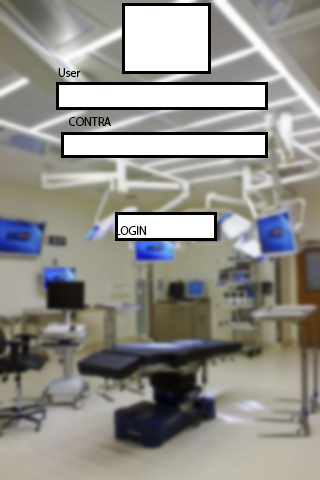
<style>
.page{position:relative;width:320px;height:480px}
.page>*{position:absolute;margin:0}
.t1{font:12px "MyriadPro-Regular";color:#000000}
</style>
<div class="page">
<p class="t1" style="left:58px;top:68px;width:23px;height:9px">User</p>
<p class="t1" style="left:69px;top:117px;width:42px;height:9px">CONTRA</p>
<p class="t1" style="left:115px;top:226px;width:31px;height:9px">LOGIN</p>
</div>
